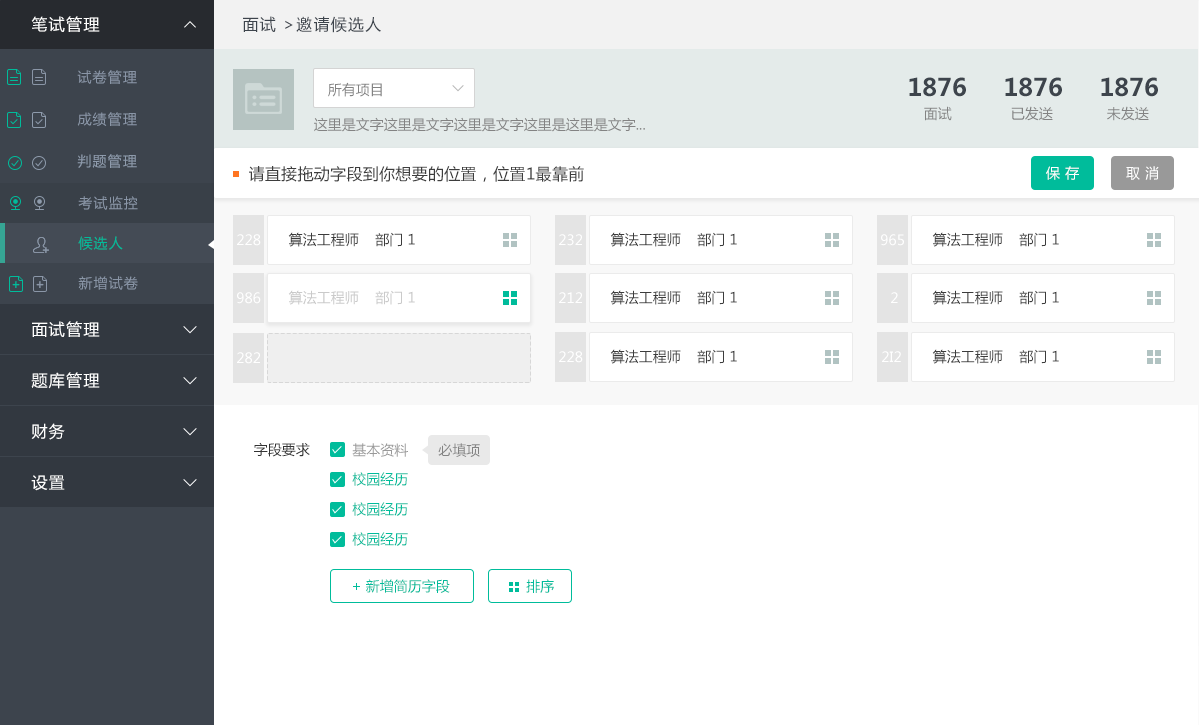
<style>
.page{position:relative;width:1199px;height:725px;background:#ffffff}
.page>*{position:absolute;margin:0}
.t1{font:16px "MicrosoftYaHei";letter-spacing:0.08em;color:#ffffff}
.t2{font:16px "MicrosoftYaHei";letter-spacing:0.08em;color:#3d444c}
.t3{font:14px "MicrosoftYaHei";letter-spacing:0.08em;color:#8a96a7}
.t4{font:24px "MicrosoftYaHei-Bold";color:#3d444c}
.t5{font:14px "MicrosoftYaHei";color:#838383;text-transform:uppercase}
.t6{font:14px "MicrosoftYaHei";letter-spacing:0.08em;color:#8e9bac}
.t7{font:16px "MicrosoftYaHei";letter-spacing:0.02em;color:#3d3d3d}
.t8{font:14px "MicrosoftYaHei";letter-spacing:0.04em;color:#ffffff;text-transform:uppercase}
.t9{font:14px "MicrosoftYaHei";color:#3c3c3c;text-transform:uppercase}
.t10{font:14px "MicrosoftYaHei";letter-spacing:0.08em;color:#00bc9b}
.t11{font:14px "MicrosoftYaHei";color:#ffffff;text-transform:uppercase}
.t12{font:13px "PingFang-SC-Bold";letter-spacing:0.02em;color:#00bc9b}
.t13{font:13px "PingFang-SC-Bold";letter-spacing:0.02em;color:#8a96a7}
.t14{font:14px "MicrosoftYaHei";color:#cacaca;text-transform:uppercase}
.t15{font:14px "MicrosoftYaHei";color:#333333;text-transform:uppercase}
.t16{font:14px "MicrosoftYaHei";color:#999999;text-transform:uppercase}
.t17{font:14px "MicrosoftYaHei";color:#00bc9b;text-transform:uppercase}
</style>
<div class="page">
<p class="t1" style="left:31px;top:16px;width:69px;height:16px">笔试管理</p>
<p class="t2" style="left:243px;top:16px;width:138px;height:17px">面试 &gt;邀请候选人</p>
<p class="t3" style="left:77px;top:70px;width:60px;height:14px">试卷管理</p>
<p class="t4" style="left:909px;top:77px;width:57px;height:20px">1876</p>
<p class="t4" style="left:1005px;top:77px;width:57px;height:20px">1876</p>
<p class="t4" style="left:1101px;top:77px;width:57px;height:20px">1876</p>
<p class="t5" style="left:328px;top:82px;width:54px;height:15px">所有项目</p>
<p class="t3" style="left:77px;top:112px;width:60px;height:14px">成绩管理</p>
<p class="t5" style="left:924px;top:106px;width:28px;height:15px">面试</p>
<p class="t5" style="left:1011px;top:106px;width:42px;height:15px">已发送</p>
<p class="t5" style="left:1107px;top:106px;width:42px;height:15px">未发送</p>
<p class="t5" style="left:314px;top:117px;width:331px;height:15px">这里是文字这里是文字这里是文字这里是这里是文字...</p>
<p class="t6" style="left:77px;top:154px;width:60px;height:14px">判题管理</p>
<p class="t7" style="left:249px;top:166px;width:335px;height:16px">请直接拖动字段到你想要的位置，位置1最靠前</p>
<p class="t8" style="left:1046px;top:166px;width:33px;height:14px">保 存</p>
<p class="t8" style="left:1126px;top:166px;width:33px;height:14px">取 消</p>
<p class="t3" style="left:78px;top:196px;width:60px;height:14px">考试监控</p>
<p class="t9" style="left:288px;top:232px;width:127px;height:15px">算法工程师    部门 1</p>
<p class="t9" style="left:610px;top:232px;width:127px;height:15px">算法工程师    部门 1</p>
<p class="t9" style="left:932px;top:232px;width:127px;height:15px">算法工程师    部门 1</p>
<p class="t10" style="left:78px;top:236px;width:45px;height:14px">候选人</p>
<p class="t11" style="left:237px;top:234px;width:24px;height:12px">228</p>
<p class="t11" style="left:559px;top:234px;width:23px;height:12px">232</p>
<p class="t11" style="left:881px;top:234px;width:23px;height:12px">965</p>
<p class="t12" style="left:12px;top:281px;width:8px;height:7px">+</p>
<p class="t13" style="left:36px;top:281px;width:8px;height:7px">+</p>
<p class="t3" style="left:78px;top:276px;width:60px;height:14px">新增试卷</p>
<p class="t11" style="left:237px;top:292px;width:24px;height:12px">986</p>
<p class="t14" style="left:288px;top:290px;width:127px;height:15px">算法工程师    部门 1</p>
<p class="t11" style="left:559px;top:292px;width:23px;height:11px">212</p>
<p class="t9" style="left:610px;top:290px;width:127px;height:15px">算法工程师    部门 1</p>
<p class="t11" style="left:891px;top:292px;width:7px;height:11px">2</p>
<p class="t9" style="left:932px;top:290px;width:127px;height:15px">算法工程师    部门 1</p>
<p class="t1" style="left:32px;top:321px;width:68px;height:16px">面试管理</p>
<p class="t11" style="left:237px;top:352px;width:23px;height:12px">282</p>
<p class="t11" style="left:559px;top:351px;width:24px;height:12px">228</p>
<p class="t9" style="left:610px;top:349px;width:127px;height:15px">算法工程师    部门 1</p>
<p class="t11" style="left:882px;top:351px;width:19px;height:11px">2i2</p>
<p class="t9" style="left:932px;top:349px;width:127px;height:15px">算法工程师    部门 1</p>
<p class="t1" style="left:31px;top:372px;width:69px;height:17px">题库管理</p>
<p class="t1" style="left:31px;top:423px;width:34px;height:17px">财务</p>
<p class="t15" style="left:254px;top:442px;width:56px;height:15px">字段要求</p>
<p class="t16" style="left:352px;top:443px;width:56px;height:14px">基本资料</p>
<p class="t5" style="left:438px;top:443px;width:42px;height:14px">必填项</p>
<p class="t17" style="left:352px;top:472px;width:56px;height:14px">校园经历</p>
<p class="t1" style="left:31px;top:475px;width:34px;height:16px">设置</p>
<p class="t17" style="left:352px;top:502px;width:56px;height:14px">校园经历</p>
<p class="t17" style="left:352px;top:532px;width:56px;height:14px">校园经历</p>
<p class="t17" style="left:353px;top:579px;width:97px;height:14px">+ 新增简历字段</p>
<p class="t17" style="left:526px;top:579px;width:28px;height:14px">排序</p>
</div>
